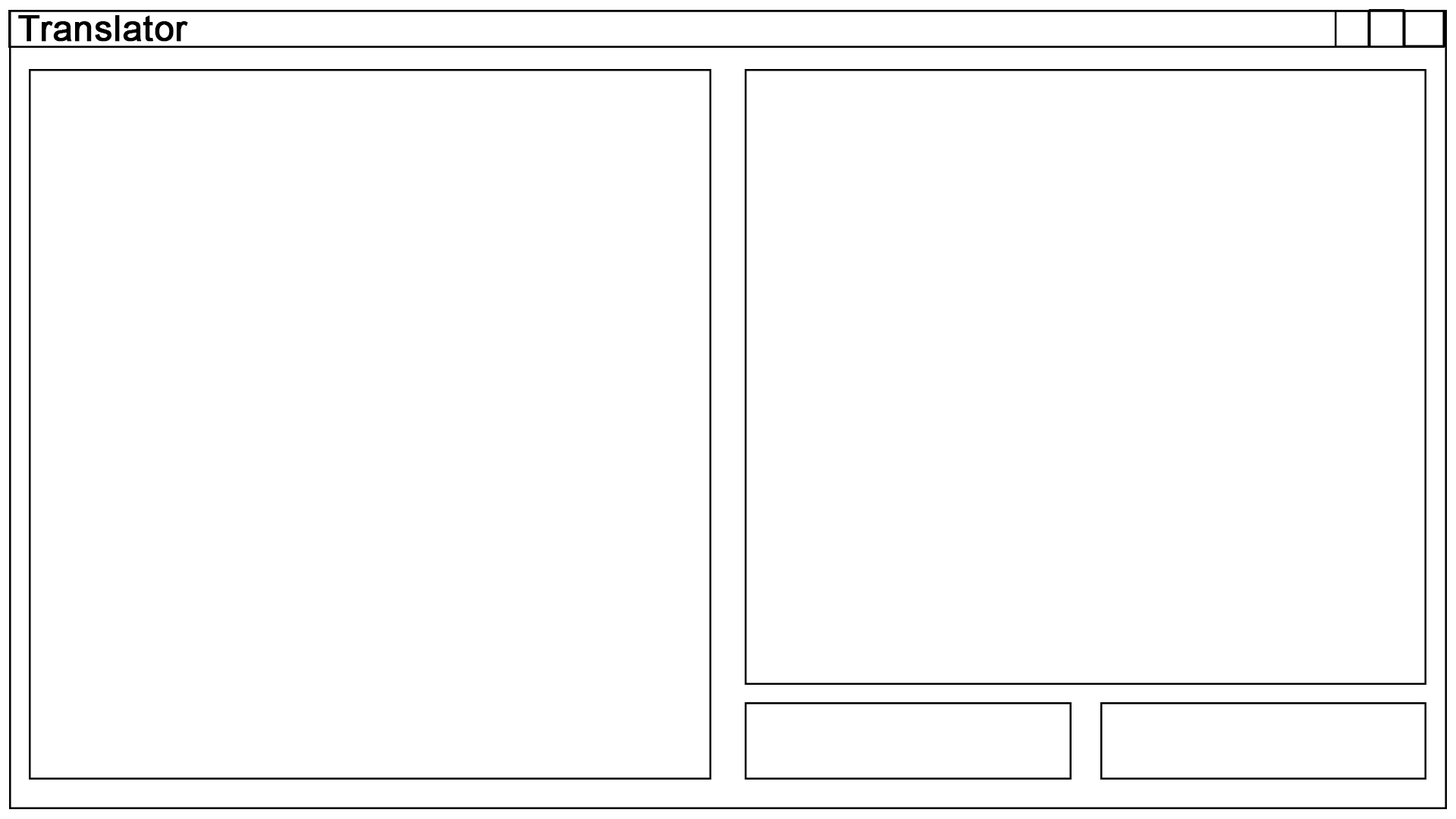
<style>
.page{position:relative;width:1456px;height:819px;background:#ffffff}
.page>*{position:absolute;margin:0}
.t1{font:35.9px "ArialMT";color:#000000;font-weight:bold}
</style>
<div class="page">
<p class="t1" style="left:18px;top:15px;width:170px;height:27px">Translator</p>
</div>
